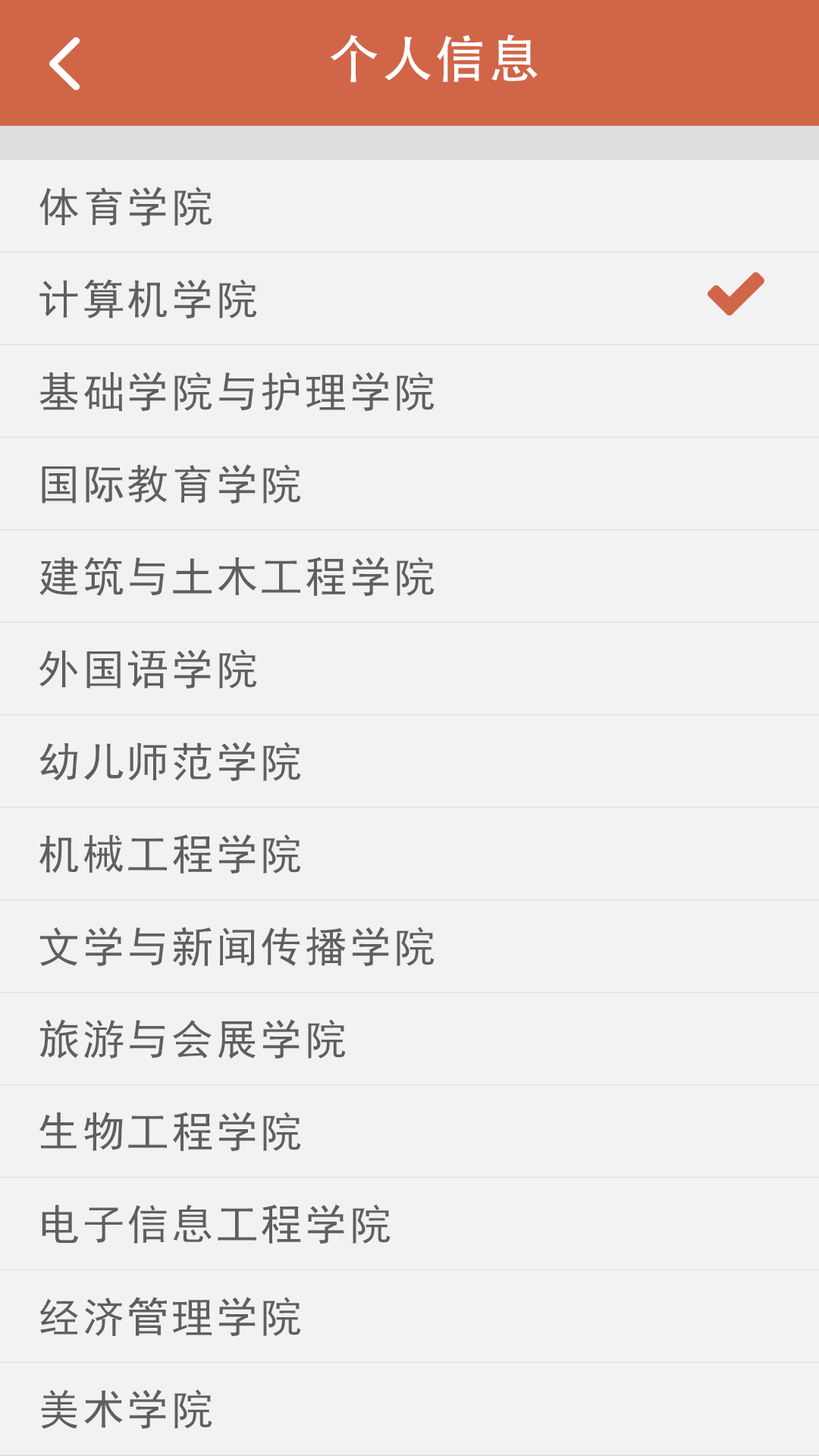
<style>
.page{position:relative;width:819px;height:1456px;background:#f3f2f2}
.page>*{position:absolute;margin:0}
.t1{font:50.8px "AdobeHeitiStd-Regular";letter-spacing:0.06em;color:#ffffff}
.t2{font:41.8px "SimHei";letter-spacing:0.06em;color:#5f5f5f}
</style>
<div class="page">
<p class="t1" style="left:330px;top:34px;width:208px;height:49px">个人信息</p>
<p class="t2" style="left:39px;top:187px;width:173px;height:39px">体育学院</p>
<p class="t2" style="left:39px;top:279px;width:218px;height:39px">计算机学院</p>
<p class="t2" style="left:39px;top:372px;width:396px;height:39px">基础学院与护理学院</p>
<p class="t2" style="left:42px;top:464px;width:259px;height:40px">国际教育学院</p>
<p class="t2" style="left:39px;top:557px;width:396px;height:39px">建筑与土木工程学院</p>
<p class="t2" style="left:39px;top:649px;width:218px;height:40px">外国语学院</p>
<p class="t2" style="left:39px;top:742px;width:262px;height:39px">幼儿师范学院</p>
<p class="t2" style="left:39px;top:834px;width:262px;height:40px">机械工程学院</p>
<p class="t2" style="left:40px;top:927px;width:395px;height:39px">文学与新闻传播学院</p>
<p class="t2" style="left:39px;top:1019px;width:307px;height:40px">旅游与会展学院</p>
<p class="t2" style="left:39px;top:1112px;width:262px;height:39px">生物工程学院</p>
<p class="t2" style="left:42px;top:1204px;width:349px;height:40px">电子信息工程学院</p>
<p class="t2" style="left:39px;top:1297px;width:262px;height:39px">经济管理学院</p>
<p class="t2" style="left:41px;top:1389px;width:171px;height:40px">美术学院</p>
</div>
